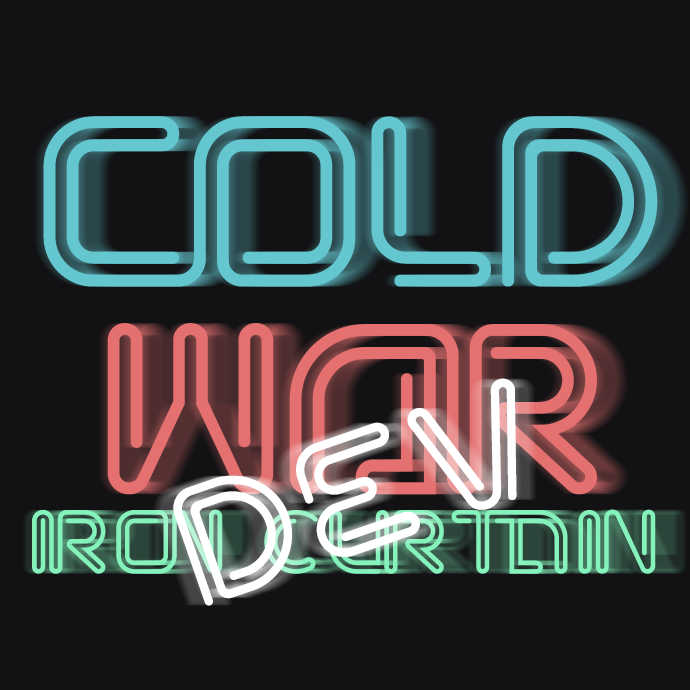
<style>
.page{position:relative;width:690px;height:690px;background:#121214}
.page>*{position:absolute;margin:0}
.t1{font:174px "NEONWORLDDEMO-Regular";color:#64c7d0}
.t2{font:174px "NEONWORLDDEMO-Regular";color:#e47070}
.t3{font:120.9px "NEONWORLDDEMO-Regular";letter-spacing:0.075em;color:#ffffff}
.t4{font:65px "NEONWORLDDEMO-Regular";letter-spacing:0.075em;color:#85f1bb}
</style>
<div class="page">
<p class="t1" style="left:43px;top:116px;width:615px;height:171px">coLD</p>
<p class="t2" style="left:107px;top:323px;width:490px;height:172px">WAR</p>
<p class="t3" style="left:173px;top:378px;width:344px;height:228px;rotate:-19deg">Dev</p>
<p class="t4" style="left:32px;top:509px;width:624px;height:65px">IRON CURTAIN</p>
</div>
